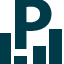
<style>
.page{position:relative;width:64px;height:64px;background:#003b49}
.page>*{position:absolute;margin:0}
.t1{font:75px "MyriadPro-Bold";color:#003b49}
</style>
<div class="page">
<p class="t1" style="left:15px;top:0px;width:37px;height:49px">P</p>
</div>
